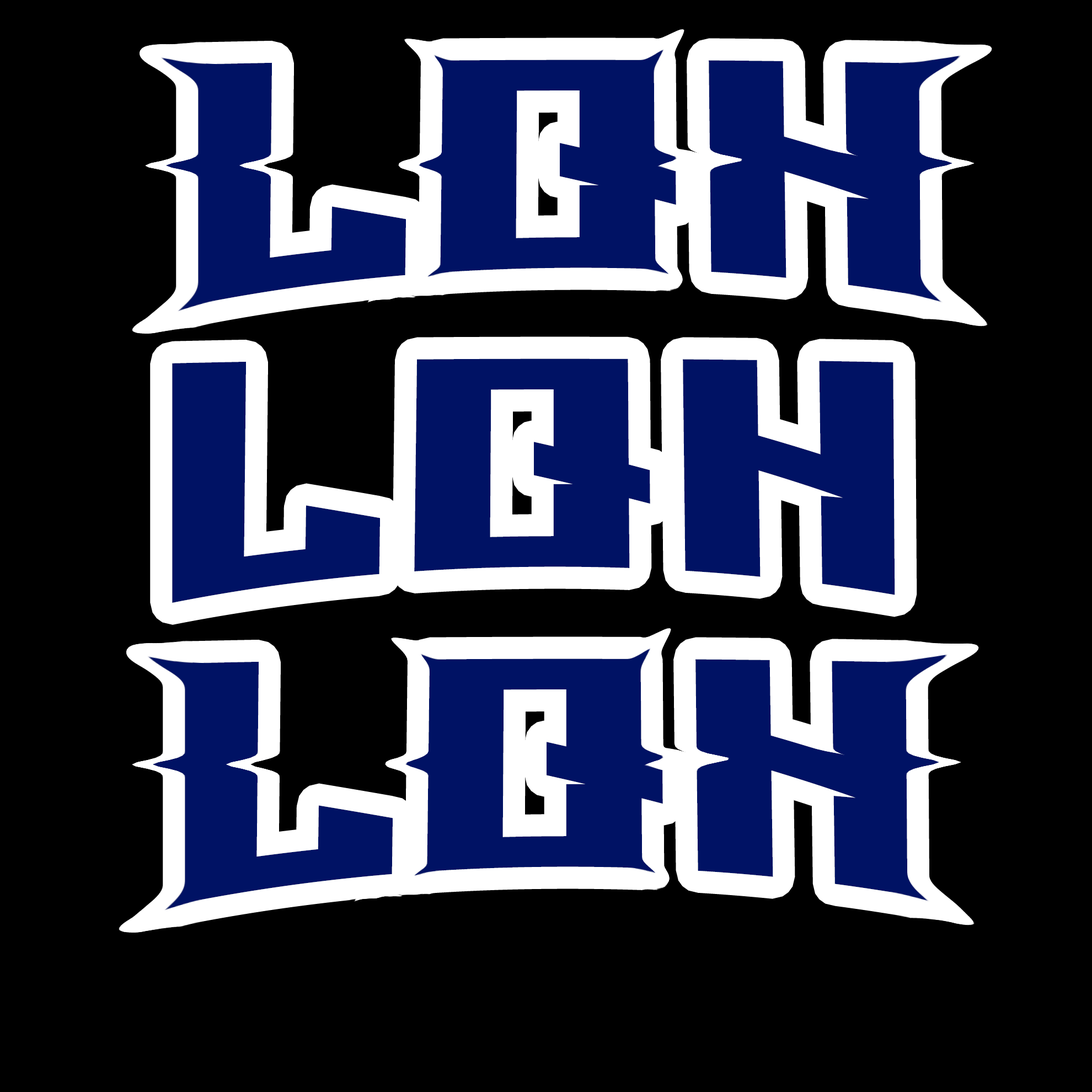
<style>
.page{position:relative;width:1092px;height:1092px;background:#000000}
.page>*{position:absolute;margin:0}
.t1{font:307.6px "LongShot";letter-spacing:0.01em;color:#001264;font-variant:small-caps;scale:2.11 1}
</style>
<div class="page">
<p class="t1" style="left:172px;top:358px;width:723px;height:245px">LQH</p>
</div>
